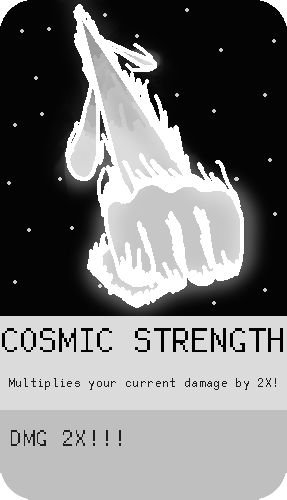
<style>
.page{position:relative;width:287px;height:500px;background:#040404}
.page>*{position:absolute;margin:0}
.t1{font:37.5px "FreePixel-Regular";color:#000000}
.t2{font:14.1px "FreePixel-Regular";color:#1e1e1e}
.t3{font:25px "FreePixel-Regular";color:#1e1e1e}
</style>
<div class="page">
<p class="t1" style="left:2px;top:328px;width:281px;height:24px">COSMIC STRENGTH</p>
<p class="t2" style="left:9px;top:378px;width:267px;height:12px">Multiplies your current damage by 2X!</p>
<p class="t3" style="left:11px;top:430px;width:110px;height:16px">DMG 2X!!!</p>
</div>
